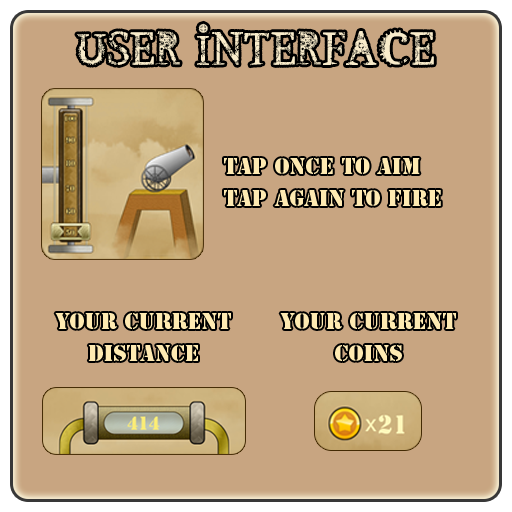
<style>
.page{position:relative;width:512px;height:512px;background:#c8a581}
.page>*{position:absolute;margin:0}
.t1{font:50px "SteampunkbyMartavanEck";letter-spacing:0.01em;color:#f9eccb}
.t2{font:21px/32px "StencilStd";letter-spacing:0.01em;color:#feeab2}
</style>
<div class="page">
<p class="t1" style="left:77px;top:23px;width:357px;height:43px">USER INTERFACE</p>
<p class="t2" style="left:224px;top:158px;width:217px;height:48px">TAP ONCE TO AIM <br>TAP AGAIN TO FIRE</p>
<p class="t2" style="left:55px;top:313px;width:176px;height:48px;text-align:center">YOUR CURRENT<br>DISTANCE</p>
<p class="t2" style="left:280px;top:313px;width:176px;height:48px;text-align:center">your current <br>coins</p>
</div>
